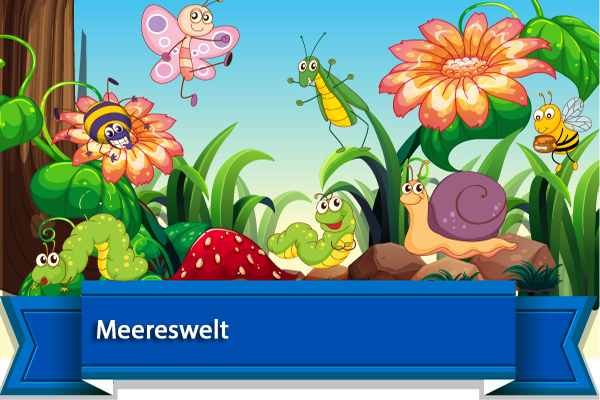
<style>
.page{position:relative;width:600px;height:400px}
.page>*{position:absolute;margin:0}
.t1{font:26.1px "MyriadPro-Regular";color:#fefffe;font-weight:bold}
</style>
<div class="page">
<p class="t1" style="left:97px;top:319px;width:132px;height:20px">Meereswelt</p>
</div>
